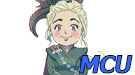
<style>
.page{position:relative;width:135px;height:75px;background:#ffffff}
.page>*{position:absolute;margin:0}
.t1{font:24px "Tahoma-Bold";letter-spacing:-0.065em;font-weight:bold;font-style:italic}
</style>
<div class="page">
<p class="t1" style="left:78px;top:55px;width:55px;height:19px">MCU</p>
</div>
